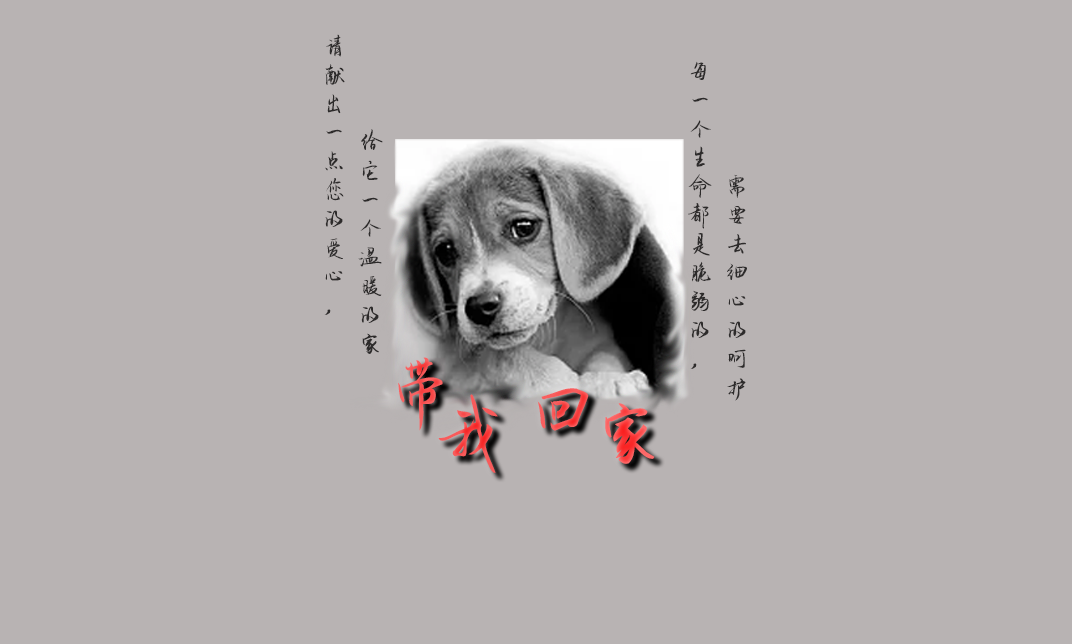
<style>
.page{position:relative;width:1072px;height:644px;background:#b8b3b3}
.page>*{position:absolute;margin:0}
.t1{font:24px "qiantubifengshouxieti";color:#2d2b2b}
.t2{font:72px "qiantubifengshouxieti";color:#f75757}
.t3{font:72px "qiantubifengshouxieti";color:#f85151}
.t4{font:72px "qiantubifengshouxieti";color:#f85252}
.t5{font:72px "qiantubifengshouxieti"}
</style>
<div class="page">
<p class="t1" style="left:324px;top:34px;width:21px;height:281px;text-align:center">请<br>献<br>出<br>一<br>点<br>您<br>的<br>爱<br>心<br>，</p>
<p class="t1" style="left:688px;top:61px;width:24px;height:308px;text-align:center">每<br>一<br>个<br>生<br>命<br>都<br>是<br>脆<br>弱<br>的<br>，</p>
<p class="t1" style="left:358px;top:129px;width:25px;height:225px;text-align:center">给<br>它<br>一<br>个<br>温<br>暖<br>的<br>家</p>
<p class="t1" style="left:727px;top:174px;width:20px;height:227px;text-align:center">需<br>要<br>去<br>细<br>心<br>的<br>呵<br>护</p>
<p class="t2" style="left:398px;top:357px;width:45px;height:74px">带</p>
<p class="t3" style="left:537px;top:388px;width:52px;height:43px">回</p>
<p class="t4" style="left:438px;top:394px;width:60px;height:79px">我</p>
<p class="t5" style="left:605px;top:403px;width:50px;height:61px">家</p>
</div>
